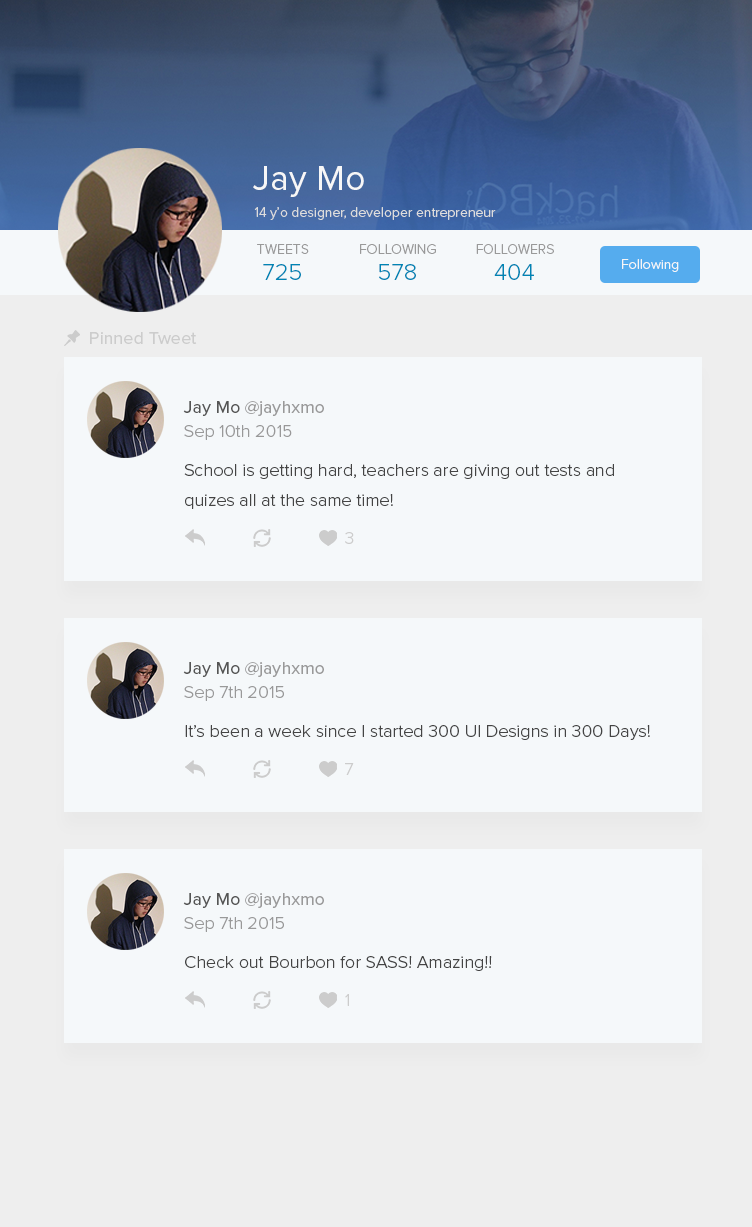
<style>
.page{position:relative;width:752px;height:1227px;background:#f5f8fa}
.page>*{position:absolute;margin:0}
.t1{font:36px "ProximaNova-Regular";color:#f7f7f7}
.t2{font:14px "ProximaNova-Light";color:#dddddd}
.t3{font:14px "ProximaNova-Light";color:#999999}
.t4{font:24px "ProximaNova-Light";color:#0084b4}
.t5{font:14px "ProximaNova-Light";color:#f7f7f7}
.t6{font:18px "ProximaNova-Regular";color:#cccccc}
.t7{font:18px "ProximaNova-Regular";color:#999999}
.t8{font:18px "ProximaNova-Regular";color:#555555}
.t9{font:18px "ProximaNova-Light";color:#999999}
.t10{font:18px/30px "ProximaNova-Light";color:#444444}
.t11{font:18px "ProximaNova-Light";color:#cccccc}
.t12{font:18px "ProximaNova-Light";color:#444444}
</style>
<div class="page">
<p class="t1" style="left:253px;top:166px;width:111px;height:31px">Jay Mo</p>
<p class="t2" style="left:254px;top:207px;width:242px;height:13px">14 y’o designer, developer entrepreneur</p>
<p class="t3" style="left:257px;top:244px;width:52px;height:10px">TWEETS</p>
<p class="t3" style="left:360px;top:244px;width:76px;height:10px">FOLLOWING</p>
<p class="t3" style="left:476px;top:244px;width:78px;height:10px">FOLLOWERS</p>
<p class="t4" style="left:263px;top:264px;width:38px;height:16px">725</p>
<p class="t4" style="left:379px;top:264px;width:37px;height:16px">578</p>
<p class="t4" style="left:494px;top:264px;width:40px;height:16px">404</p>
<p class="t5" style="left:622px;top:259px;width:57px;height:13px">Following</p>
<p class="t6" style="left:90px;top:332px;width:107px;height:12px">Pinned Tweet</p>
<p class="t7" style="left:183px;top:401px;width:141px;height:15px"><span class="t8">Jay Mo </span>@jayhxmo</p>
<p class="t9" style="left:184px;top:425px;width:108px;height:15px">Sep 10th 2015</p>
<p class="t10" style="left:184px;top:464px;width:430px;height:45px">School is getting hard, teachers are giving out tests and<br>quizes all at the same time!</p>
<p class="t11" style="left:345px;top:532px;width:9px;height:12px">3</p>
<p class="t7" style="left:183px;top:662px;width:141px;height:15px"><span class="t8">Jay Mo </span>@jayhxmo</p>
<p class="t9" style="left:184px;top:686px;width:100px;height:15px">Sep 7th 2015</p>
<p class="t12" style="left:185px;top:725px;width:465px;height:15px">It’s been a week since I started 300 UI Designs in 300 Days!</p>
<p class="t11" style="left:345px;top:763px;width:9px;height:12px">7</p>
<p class="t7" style="left:183px;top:893px;width:141px;height:15px"><span class="t8">Jay Mo </span>@jayhxmo</p>
<p class="t9" style="left:184px;top:917px;width:100px;height:15px">Sep 7th 2015</p>
<p class="t12" style="left:185px;top:956px;width:307px;height:15px">Check out Bourbon for SASS! Amazing!!</p>
<p class="t11" style="left:345px;top:994px;width:4px;height:12px">1</p>
</div>
